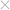
<style>
.page{position:relative;width:10px;height:10px;background:#ffffff}
.page>*{position:absolute;margin:0}
.t1{font:13.5px "bubbleboddylight-Light";color:#a8a8a8}
</style>
<div class="page">
<p class="t1" style="left:0px;top:0px;width:10px;height:10px">X</p>
</div>
